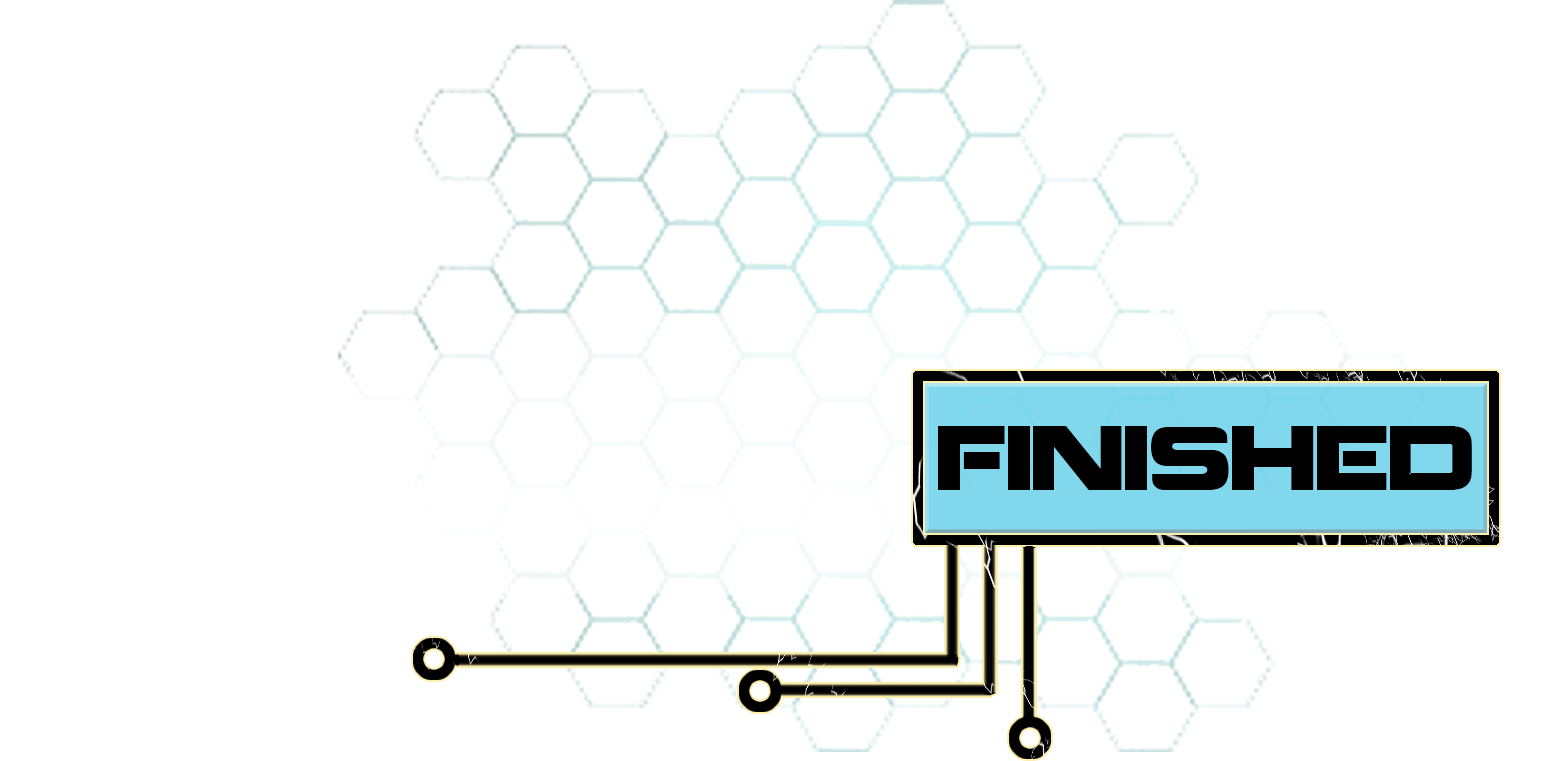
<style>
.page{position:relative;width:1547px;height:761px;background:#ffffff}
.page>*{position:absolute;margin:0}
.t1{font:90px "Coalition";color:#000000}
</style>
<div class="page">
<p class="t1" style="left:938px;top:426px;width:534px;height:64px">finished</p>
</div>
